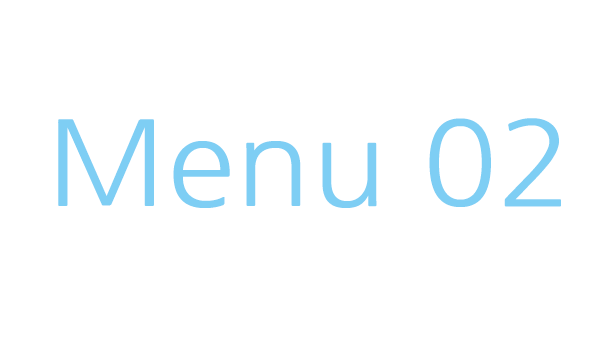
<style>
.page{position:relative;width:600px;height:337px;background:#ffffff}
.page>*{position:absolute;margin:0}
.t1{font:117px "NanumGothic";color:#7ecef4;scale:1.07 1}
</style>
<div class="page">
<p class="t1" style="left:58px;top:118px;width:503px;height:90px">Menu 02</p>
</div>
